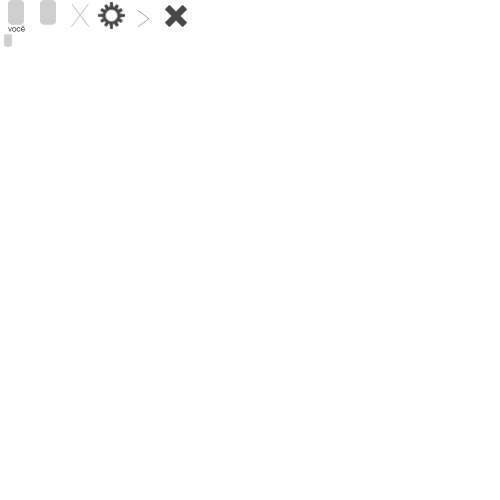
<style>
.page{position:relative;width:500px;height:500px;background:#ffffff}
.page>*{position:absolute;margin:0}
.t1{font:32px "HelveticaNeue-UltraLight";letter-spacing:-0.01em}
.t2{font:32px "HelveticaNeue-UltraLight";letter-spacing:-0.01em;scale:0.65 1}
.t3{font:8px "Helvetica-Light";letter-spacing:-0.01em}
</style>
<div class="page">
<p class="t1" style="left:71px;top:4px;width:19px;height:23px">X</p>
<p class="t2" style="left:138px;top:10px;width:11px;height:17px">&gt;</p>
<p class="t3" style="left:8px;top:25px;width:17px;height:7px">você</p>
</div>
